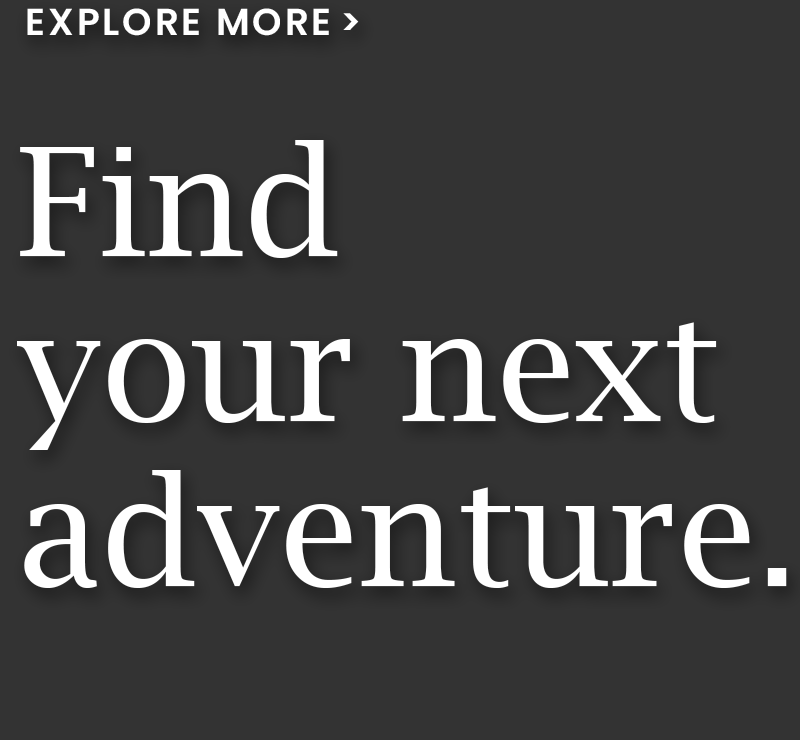
<style>
.page{position:relative;width:800px;height:740px;background:#333333}
.page>*{position:absolute;margin:0}
.t1{font:37.5px "Poppins-SemiBold";letter-spacing:0.075em;color:#ffffff}
.t2{font:151.4px/164.6px "LucidaBright";color:#ffffff}
</style>
<div class="page">
<p class="t1" style="left:27px;top:8px;width:332px;height:28px">EXPLORE MORE&gt;</p>
<p class="t2" style="left:17px;top:140px;width:770px;height:448px">Find <br>your next <br>adventure.</p>
</div>
